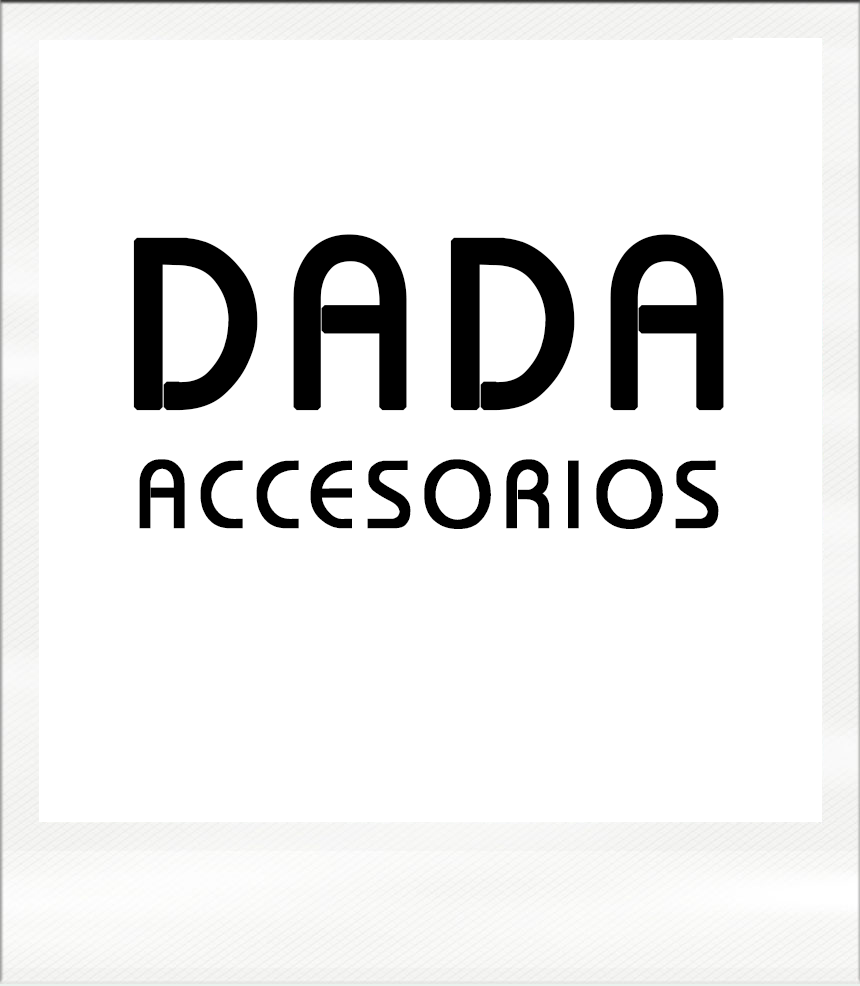
<style>
.page{position:relative;width:860px;height:986px;background:#ffffff}
.page>*{position:absolute;margin:0}
.t1{font:237px "Bauhaus";letter-spacing:0.1em;color:#000000;font-weight:bold;scale:0.94 1}
.t2{font:94.8px "Bauhaus";letter-spacing:0.1em;color:#000000;font-weight:bold;scale:0.94 1}
</style>
<div class="page">
<p class="t1" style="left:133px;top:234px;width:591px;height:177px">DADA</p>
<p class="t2" style="left:139px;top:459px;width:580px;height:70px">ACCESORIOS</p>
</div>
